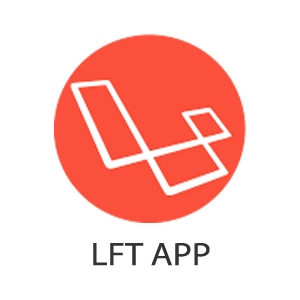
<style>
.page{position:relative;width:300px;height:300px;background:#ffffff}
.page>*{position:absolute;margin:0}
.t1{font:32.4px "MyriadPro-Regular";color:#333333;scale:1.11 1}
</style>
<div class="page">
<p class="t1" style="left:93px;top:243px;width:117px;height:23px">LFT APP</p>
</div>
